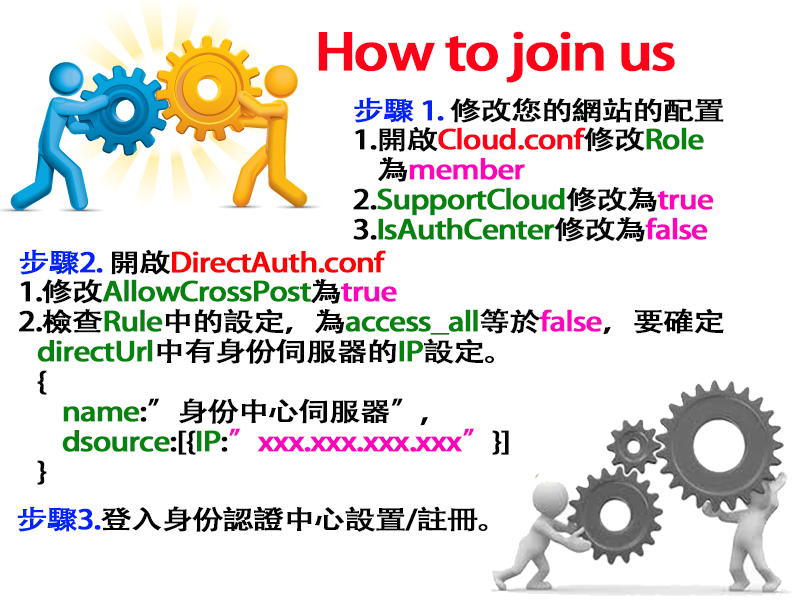
<style>
.page{position:relative;width:800px;height:600px;background:#ffffff}
.page>*{position:absolute;margin:0}
.t1{font:49.5px "AdobeHeitiStd-Regular";letter-spacing:-0.05em;color:#fe0118;font-weight:bold;scale:1.18 1}
.t2{font:26.4px/30px "AdobeHeitiStd-Regular";letter-spacing:-0.05em;color:#060606;font-weight:bold;scale:1.18 1}
.t3{font:26.4px/30px "AdobeHeitiStd-Regular";letter-spacing:-0.05em;color:#0023fa;font-weight:bold;scale:1.18 1}
.t4{font:26.4px/30px "AdobeHeitiStd-Regular";letter-spacing:-0.05em;color:#fe0118;font-weight:bold;scale:1.18 1}
.t5{font:26.4px/30px "AdobeHeitiStd-Regular";letter-spacing:-0.05em;color:#05830e;font-weight:bold;scale:1.18 1}
.t6{font:26.4px/30px "AdobeHeitiStd-Regular";letter-spacing:-0.05em;color:#fd05ba;font-weight:bold;scale:1.18 1}
.t7{font:26.4px/30px "AdobeHeitiStd-Regular";letter-spacing:-0.05em;color:#030303;font-weight:bold;scale:1.18 1}
.t8{font:26.4px/30px "AdobeHeitiStd-Regular";letter-spacing:-0.05em;color:#f90404;font-weight:bold;scale:1.18 1}
.t9{font:26.4px "AdobeHeitiStd-Regular";letter-spacing:-0.05em;color:#030303;font-weight:bold;scale:1.18 1}
.t10{font:26.4px "AdobeHeitiStd-Regular";letter-spacing:-0.05em;color:#0023fa;font-weight:bold;scale:1.18 1}
</style>
<div class="page">
<p class="t1" style="left:318px;top:31px;width:357px;height:52px">How to join us</p>
<p class="t2" style="left:353px;top:97px;width:371px;height:145px"><span class="t3">步驟 1. </span>修改您的網站的配置<br>1.開啟<span class="t4">Cloud.conf</span>修改<span class="t5">Role<br></span>    為<span class="t6">member<br></span>2.<span class="t5">SupportCloud</span>修改為<span class="t6">true<br></span>3.<span class="t5">IsAuthCenter</span>修改為<span class="t6">false</span></p>
<p class="t6" style="left:19px;top:249px;width:705px;height:236px"><span class="t3">步驟2. </span><span class="t7">開啟</span><span class="t8">DirectAuth.conf<br></span><span class="t7">1.修改</span><span class="t5">AllowCrossPost</span><span class="t7">為</span>true<br><span class="t7">2.檢查</span><span class="t5">Rule</span><span class="t7">中的設定，為</span><span class="t5">access_all</span><span class="t7">等於</span>false<span class="t7">，要確定<br>   </span><span class="t5">directUrl</span><span class="t7">中有身份伺服器的</span><span class="t5">IP</span><span class="t7">設定。<br>   {<br>       </span><span class="t5">name</span><span class="t7">:”身份中心伺服器”,<br>       </span><span class="t5">dsource</span><span class="t7">:[{</span><span class="t5">IP</span><span class="t7">:</span>”xxx.xxx.xxx.xxx”<span class="t7">}]<br>   }</span></p>
<p class="t9" style="left:17px;top:506px;width:471px;height:26px"><span class="t10">步驟3.</span>登入身份認證中心設置/註冊。</p>
</div>
